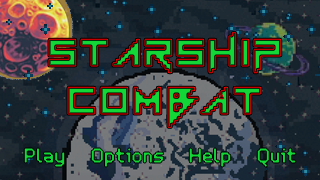
<style>
.page{position:relative;width:320px;height:180px}
.page>*{position:absolute;margin:0}
.t1{font:53.3px "Vermin-Vibes-1989";letter-spacing:0.04em}
.t2{font:53.3px "Vermin-Vibes-1989";letter-spacing:0.06em}
.t3{font:20px "Tephra0-Regular";letter-spacing:0.06em}
.t4{font:20px "Tephra0-Regular";letter-spacing:0.06em;color:#13d737}
</style>
<div class="page">
<p class="t1" style="left:49px;top:32px;width:232px;height:41px">STARSHIP</p>
<p class="t2" style="left:68px;top:87px;width:193px;height:41px">COMBAT</p>
<p class="t3" style="left:24px;top:148px;width:41px;height:19px">Play</p>
<p class="t3" style="left:91px;top:148px;width:73px;height:19px">Options</p>
<p class="t3" style="left:189px;top:148px;width:42px;height:19px">Help</p>
<p class="t4" style="left:257px;top:148px;width:39px;height:19px">Quit</p>
</div>
